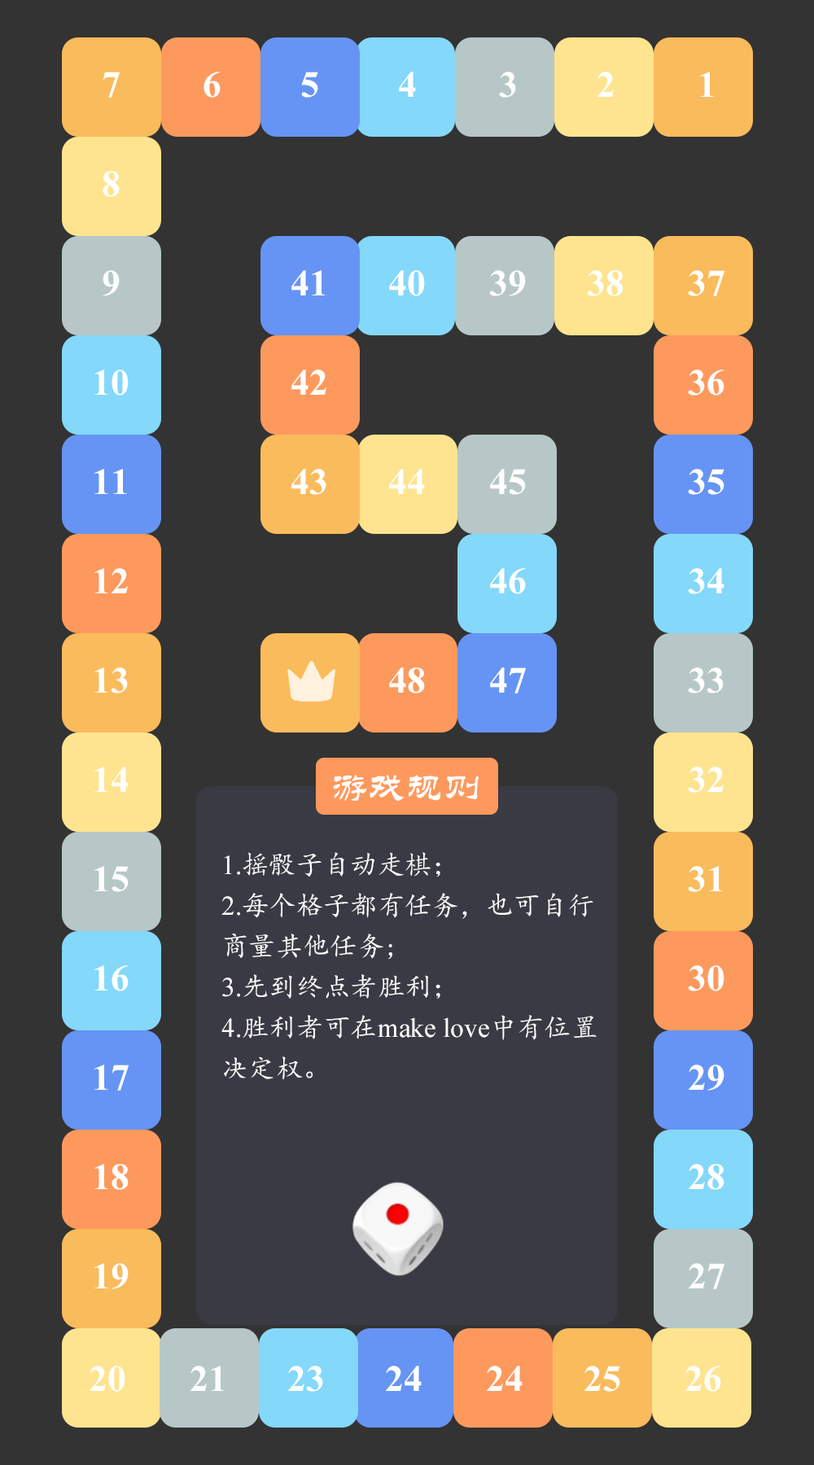
<style>
.page{position:relative;width:814px;height:1465px;background:#333333}
.page>*{position:absolute;margin:0}
.t1{font:37.3px "TimesNewRomanPS-BoldMT";color:#ffffff}
.t2{font:37.3px "STLiti";color:#ffffff}
.t3{font:27.1px/40.7px "KaiTi";color:#ffffff}
.t4{font:27.1px/40.7px "TimesNewRomanPSMT";color:#ffffff}
</style>
<div class="page">
<p class="t1" style="left:103px;top:72px;width:17px;height:26px">7</p>
<p class="t1" style="left:203px;top:72px;width:18px;height:26px">6</p>
<p class="t1" style="left:301px;top:72px;width:17px;height:26px">5</p>
<p class="t1" style="left:399px;top:72px;width:17px;height:25px">4</p>
<p class="t1" style="left:499px;top:72px;width:17px;height:26px">3</p>
<p class="t1" style="left:597px;top:72px;width:17px;height:25px">2</p>
<p class="t1" style="left:700px;top:72px;width:14px;height:25px">1</p>
<p class="t1" style="left:103px;top:171px;width:17px;height:26px">8</p>
<p class="t1" style="left:103px;top:270px;width:17px;height:26px">9</p>
<p class="t1" style="left:291px;top:270px;width:35px;height:25px">41</p>
<p class="t1" style="left:389px;top:270px;width:36px;height:26px">40</p>
<p class="t1" style="left:489px;top:270px;width:37px;height:26px">39</p>
<p class="t1" style="left:587px;top:270px;width:36px;height:26px">38</p>
<p class="t1" style="left:688px;top:270px;width:36px;height:26px">37</p>
<p class="t1" style="left:94px;top:370px;width:35px;height:26px">10</p>
<p class="t1" style="left:291px;top:370px;width:35px;height:25px">42</p>
<p class="t1" style="left:688px;top:370px;width:36px;height:26px">36</p>
<p class="t1" style="left:94px;top:469px;width:33px;height:25px">11</p>
<p class="t1" style="left:291px;top:469px;width:35px;height:26px">43</p>
<p class="t1" style="left:389px;top:469px;width:36px;height:25px">44</p>
<p class="t1" style="left:490px;top:469px;width:36px;height:26px">45</p>
<p class="t1" style="left:688px;top:469px;width:36px;height:26px">35</p>
<p class="t1" style="left:94px;top:568px;width:34px;height:25px">12</p>
<p class="t1" style="left:490px;top:568px;width:36px;height:26px">46</p>
<p class="t1" style="left:688px;top:568px;width:36px;height:26px">34</p>
<p class="t1" style="left:94px;top:667px;width:34px;height:26px">13</p>
<p class="t1" style="left:389px;top:667px;width:36px;height:26px">48</p>
<p class="t1" style="left:490px;top:667px;width:36px;height:26px">47</p>
<p class="t1" style="left:688px;top:667px;width:36px;height:26px">33</p>
<p class="t1" style="left:94px;top:767px;width:35px;height:25px">14</p>
<p class="t1" style="left:688px;top:767px;width:36px;height:26px">32</p>
<p class="t2" style="left:333px;top:775px;width:146px;height:26px">游戏规则</p>
<p class="t3" style="left:221px;top:852px;width:376px;height:228px"><span class="t4">1.</span>摇骰子自动走棋；<br><span class="t4">2.</span>每个格子都有任务，也可自行商量其他任务;<br><span class="t4">3.</span>先到终点者胜利；<br><span class="t4">4.</span>胜利者可在<span class="t4">make love</span>中有位置决定权。</p>
<p class="t1" style="left:94px;top:866px;width:35px;height:26px">15</p>
<p class="t1" style="left:688px;top:866px;width:35px;height:26px">31</p>
<p class="t1" style="left:94px;top:965px;width:35px;height:26px">16</p>
<p class="t1" style="left:688px;top:965px;width:36px;height:26px">30</p>
<p class="t1" style="left:94px;top:1065px;width:35px;height:26px">17</p>
<p class="t1" style="left:689px;top:1065px;width:35px;height:26px">29</p>
<p class="t1" style="left:94px;top:1164px;width:35px;height:26px">18</p>
<p class="t1" style="left:689px;top:1164px;width:35px;height:26px">28</p>
<p class="t1" style="left:94px;top:1263px;width:35px;height:26px">19</p>
<p class="t1" style="left:689px;top:1263px;width:35px;height:26px">27</p>
<p class="t1" style="left:90px;top:1366px;width:35px;height:26px">20</p>
<p class="t1" style="left:190px;top:1366px;width:35px;height:25px">21</p>
<p class="t1" style="left:288px;top:1366px;width:35px;height:26px">23</p>
<p class="t1" style="left:386px;top:1366px;width:36px;height:25px">24</p>
<p class="t1" style="left:487px;top:1366px;width:36px;height:25px">24</p>
<p class="t1" style="left:584px;top:1366px;width:36px;height:26px">25</p>
<p class="t1" style="left:685px;top:1366px;width:36px;height:26px">26</p>
</div>
